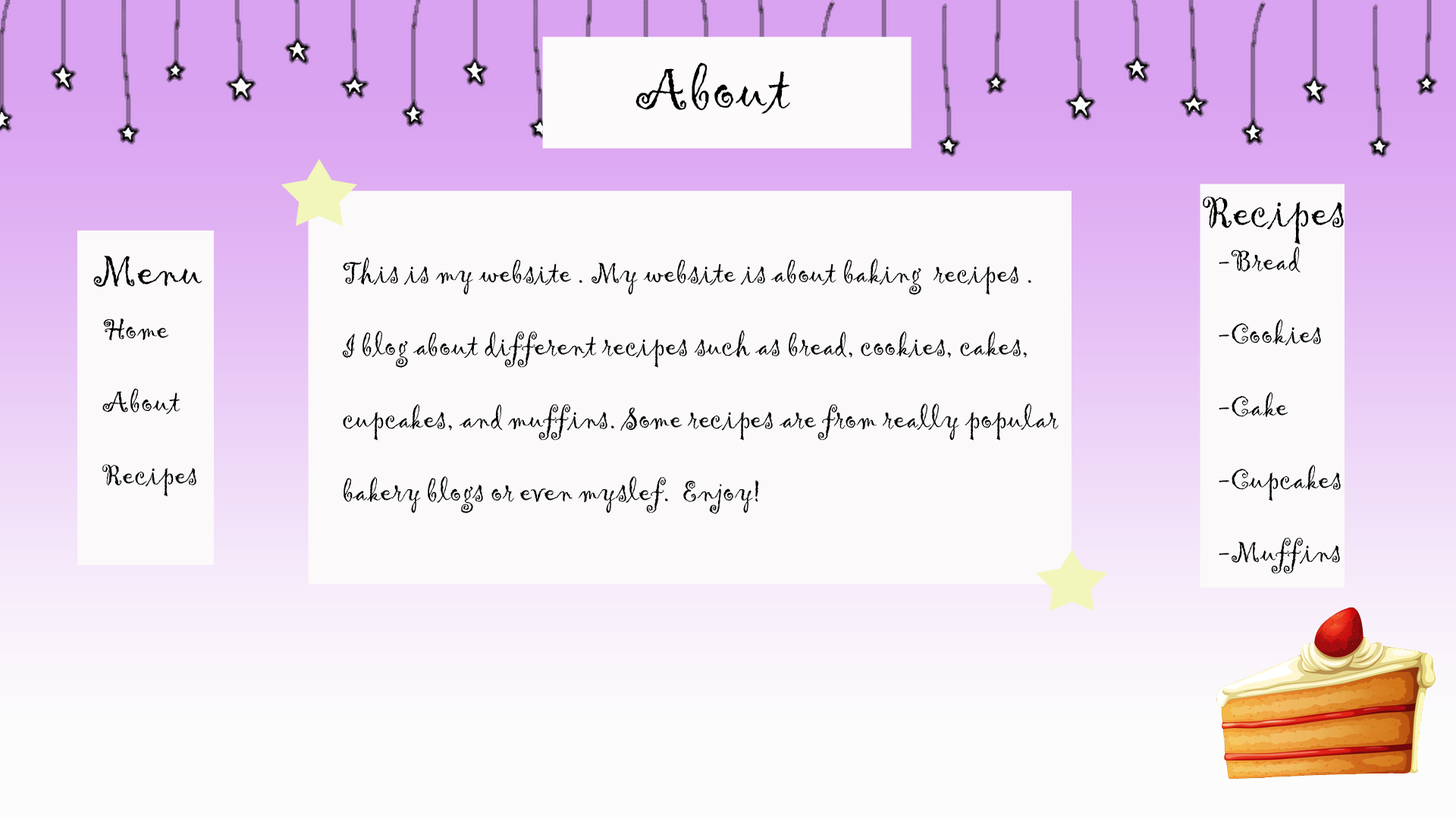
<style>
.page{position:relative;width:1456px;height:819px;background:#fbf9f9}
.page>*{position:absolute;margin:0}
.t1{font:60.7px "Gigi-Regular";color:#000000}
.t2{font:45.5px "Gigi-Regular";color:#000000}
.t3{font:30.3px "Gigi-Regular";color:#000000}
</style>
<div class="page">
<p class="t1" style="left:635px;top:62px;width:155px;height:52px">About</p>
<p class="t2" style="left:1203px;top:196px;width:141px;height:48px">Recipes</p>
<p class="t2" style="left:93px;top:256px;width:109px;height:31px">Menu</p>
<p class="t3" style="left:342px;top:257px;width:717px;height:257px">This is my website . My website is about baking  recipes .<br> <br>I blog about different recipes such as bread, cookies, cakes,<br> <br>cupcakes, and muffins. Some recipes are from really popular<br><br>bakery blogs or even myslef.  Enjoy!</p>
<p class="t3" style="left:1219px;top:246px;width:122px;height:328px">-Bread<br><br>-Cookies <br><br>-Cake<br><br>-Cupcakes<br><br>-Muffins</p>
<p class="t3" style="left:102px;top:318px;width:94px;height:179px">Home<br><br>About<br><br>Recipes</p>
</div>
